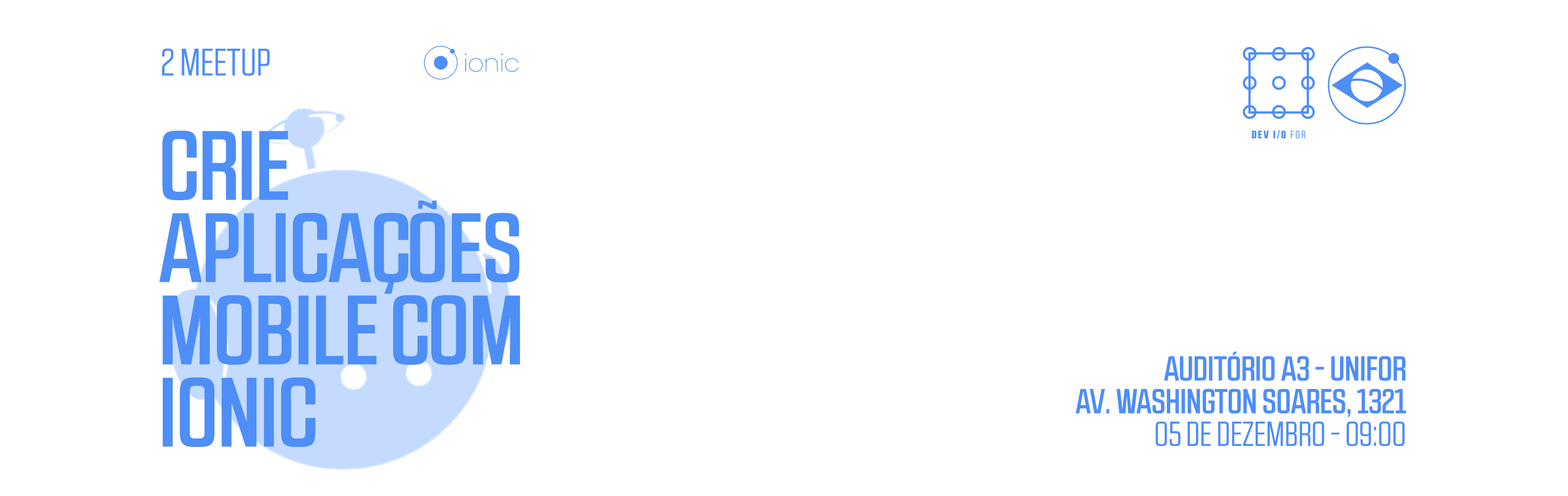
<style>
.page{position:relative;width:1568px;height:496px;background:#ffffff}
.page>*{position:absolute;margin:0}
.t1{font:38.4px "RBNo2.1a-Book";color:#4e8ef7;text-transform:uppercase}
.t2{font:98.3px/82.3px "RBNo2.1a-Medium";color:#4e8ef7;text-transform:uppercase}
.t3{font:34.8px/32.7px "RBNo2.1a-Medium";color:#4e8ef7;text-transform:uppercase}
.t4{font:34.8px/32.7px "RBNo2.1a-Book";color:#4e8ef7;text-transform:uppercase}
</style>
<div class="page">
<p class="t1" style="left:162px;top:48px;width:108px;height:28px">2 meetup</p>
<p class="t2" style="left:159px;top:130px;width:361px;height:317px">CRIE <br>APLICAÇÕES <br>MOBILE com<br>ionic</p>
<p class="t3" style="left:1076px;top:351px;width:330px;height:95px;text-align:right">AUDITÓRIO A3 - UNIFOR<br>AV. WASHINGTON SOARES, 1321<br><span class="t4">05 DE dezembro - 09:00</span></p>
</div>
